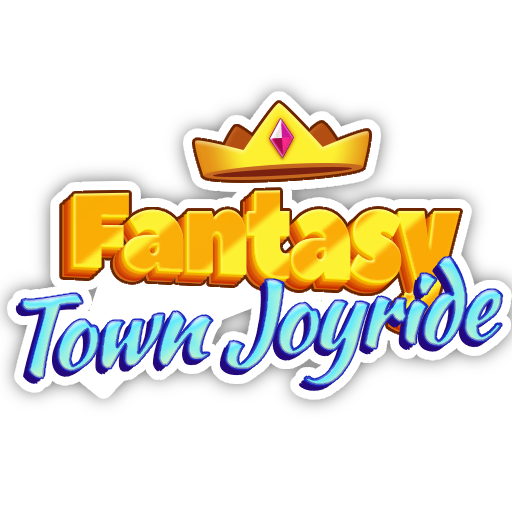
<style>
.page{position:relative;width:512px;height:512px;background:#ffffff}
.page>*{position:absolute;margin:0}
.t1{font:120.8px "PeaceSans";letter-spacing:-0.05em;scale:0.87 1}
.t2{font:99px "KaushanScript-Regular";letter-spacing:-0.05em;font-weight:bold}
</style>
<div class="page">
<p class="t1" style="left:74px;top:190px;width:387px;height:132px">Fantasy</p>
<p class="t2" style="left:21px;top:256px;width:481px;height:130px;rotate:-4deg">Town Joyride</p>
</div>
